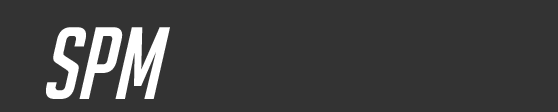
<style>
.page{position:relative;width:558px;height:112px;background:#333333}
.page>*{position:absolute;margin:0}
.t1{font:100px "BigNoodleTitling-Oblique";color:#ffffff;font-style:italic}
</style>
<div class="page">
<p class="t1" style="left:46px;top:27px;width:124px;height:72px">SPM</p>
</div>
